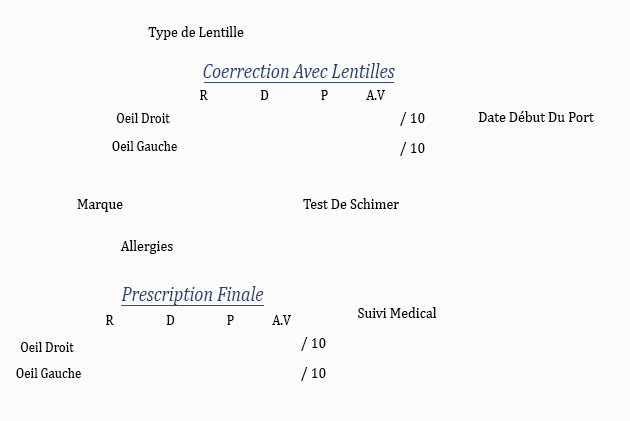
<style>
.page{position:relative;width:630px;height:421px;background:#fcfcfc}
.page>*{position:absolute;margin:0}
.t1{font:16px "Cambria";color:#030303;scale:0.88 1}
.t2{font:20.5px "Cambria-Italic";color:#2c4476;scale:0.88 1}
.t3{font:14.8px "Cambria";color:#000000;scale:0.88 1}
.t4{font:14.8px "Cambria";color:#030303;scale:0.88 1}
</style>
<div class="page">
<p class="t1" style="left:148px;top:26px;width:96px;height:14px">Type de Lentille</p>
<p class="t2" style="left:203px;top:63px;width:192px;height:15px">Coerrection Avec Lentilles</p>
<p class="t3" style="left:200px;top:90px;width:8px;height:10px">R</p>
<p class="t3" style="left:260px;top:90px;width:9px;height:10px">D</p>
<p class="t3" style="left:321px;top:90px;width:7px;height:10px">P</p>
<p class="t3" style="left:366px;top:90px;width:19px;height:10px">A.V</p>
<p class="t4" style="left:116px;top:113px;width:54px;height:10px">Oeil Droit</p>
<p class="t1" style="left:400px;top:112px;width:25px;height:14px">10 /</p>
<p class="t1" style="left:478px;top:111px;width:116px;height:11px">Date Début Du Port</p>
<p class="t4" style="left:112px;top:141px;width:65px;height:10px">Oeil Gauche</p>
<p class="t1" style="left:400px;top:142px;width:25px;height:14px">10 /</p>
<p class="t1" style="left:303px;top:198px;width:96px;height:11px">Test De Schimer</p>
<p class="t1" style="left:77px;top:199px;width:46px;height:13px">Marque</p>
<p class="t1" style="left:120px;top:240px;width:53px;height:14px">Allergies</p>
<p class="t2" style="left:121px;top:286px;width:143px;height:19px">Prescription Finale</p>
<p class="t3" style="left:106px;top:315px;width:8px;height:10px">R</p>
<p class="t3" style="left:166px;top:315px;width:9px;height:10px">D</p>
<p class="t3" style="left:227px;top:315px;width:7px;height:10px">P</p>
<p class="t3" style="left:272px;top:315px;width:19px;height:10px">A.V</p>
<p class="t1" style="left:358px;top:307px;width:79px;height:11px">Suivi Medical</p>
<p class="t4" style="left:20px;top:342px;width:54px;height:10px">Oeil Droit</p>
<p class="t1" style="left:301px;top:337px;width:25px;height:14px">10 /</p>
<p class="t4" style="left:16px;top:368px;width:65px;height:10px">Oeil Gauche</p>
<p class="t1" style="left:301px;top:367px;width:25px;height:14px">10 /</p>
</div>
